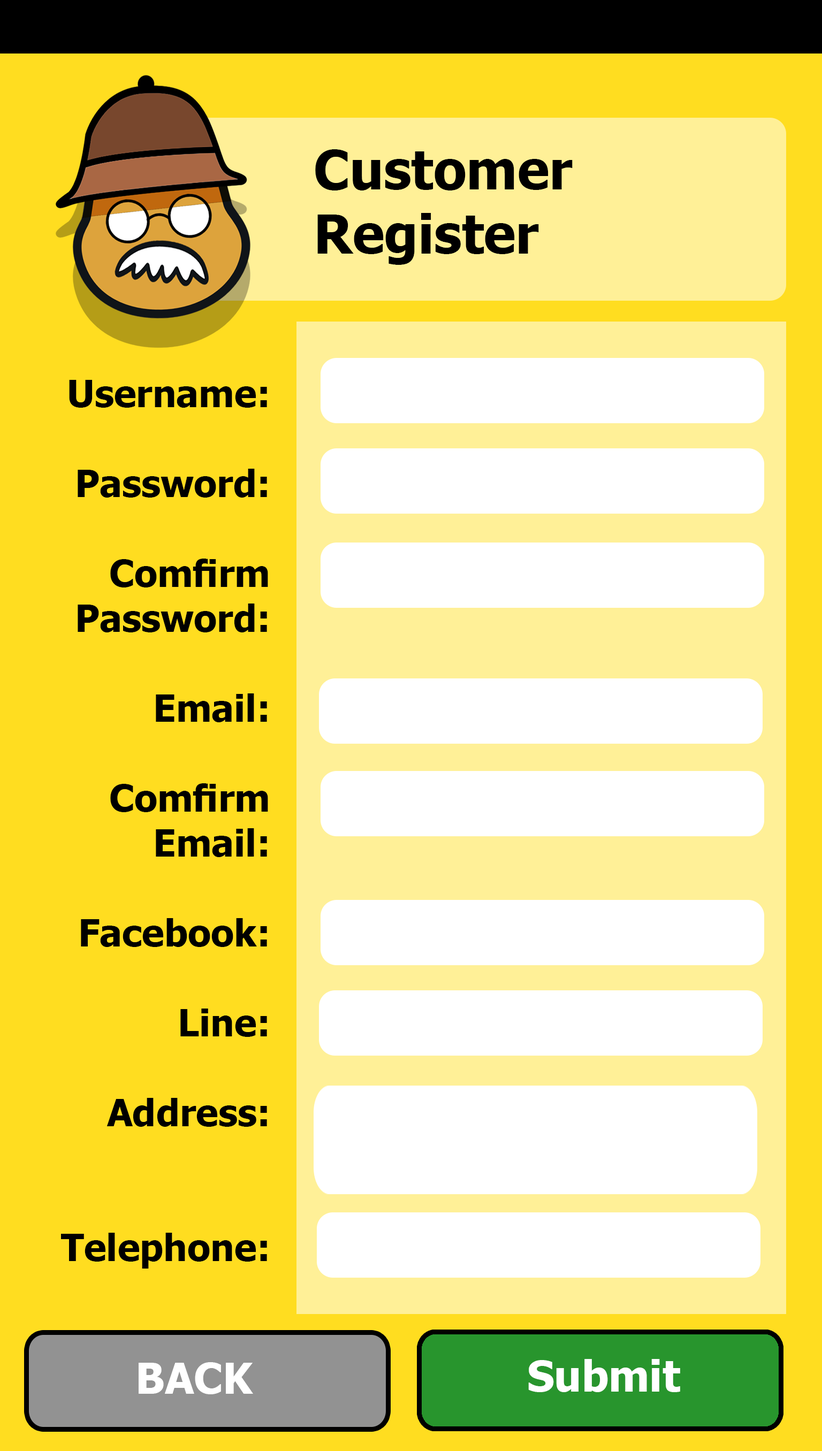
<style>
.page{position:relative;width:822px;height:1451px;background:#ffdd20}
.page>*{position:absolute;margin:0}
.t1{font:53.5px "Tahoma-Bold";color:#000000}
.t2{font:37.5px "Tahoma-Bold";color:#000000}
.t3{font:42.8px "Tahoma-Bold";color:#ffffff}
</style>
<div class="page">
<p class="t1" style="left:315px;top:149px;width:257px;height:116px">Customer <br>Register</p>
<p class="t2" style="left:61px;top:380px;width:207px;height:889px;text-align:right">Username:<br><br>Password:<br><br>Comfirm <br>Password:<br><br>Email:<br><br>Comfirm <br>Email:<br><br>Facebook:<br><br>Line:<br><br>Address:<br><br><br>Telephone:</p>
<p class="t3" style="left:528px;top:1359px;width:152px;height:33px">Submit</p>
<p class="t3" style="left:139px;top:1362px;width:114px;height:32px">BACK</p>
</div>
